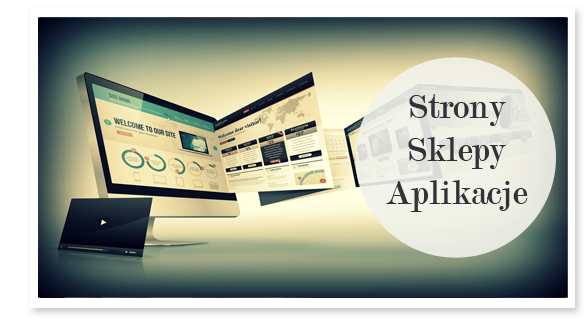
<style>
.page{position:relative;width:585px;height:323px}
.page>*{position:absolute;margin:0}
.t1{font:36px "Modern-Regular";color:#323338}
</style>
<div class="page">
<p class="t1" style="left:386px;top:94px;width:142px;height:118px;text-align:center">Strony<br>Sklepy<br>Aplikacje</p>
</div>
